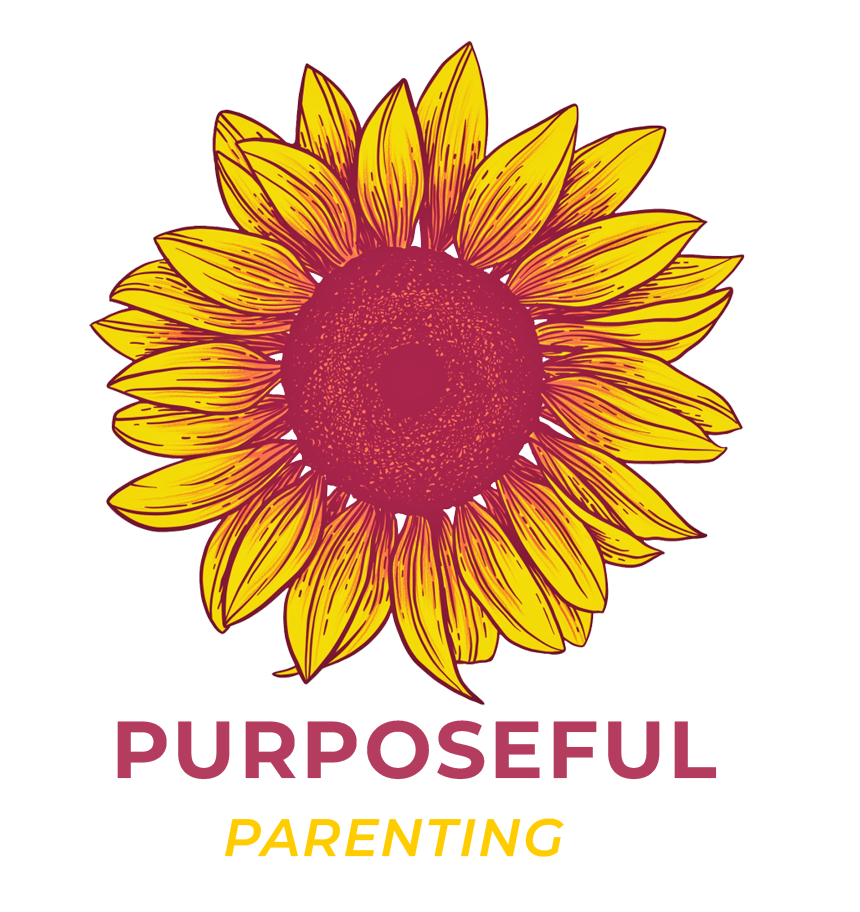
<style>
.page{position:relative;width:860px;height:912px;background:#ffffff}
.page>*{position:absolute;margin:0}
.t1{font:80.6px "MontserratRoman-Bold";letter-spacing:0.04em;color:#b33c5f}
.t2{font:52.6px "MontserratItalic-SemiBoldItalic";letter-spacing:0.04em;color:#ffcc00}
</style>
<div class="page">
<p class="t1" style="left:117px;top:720px;width:600px;height:60px">PURPOSEFUL</p>
<p class="t2" style="left:225px;top:818px;width:339px;height:39px">PARENTING</p>
</div>
